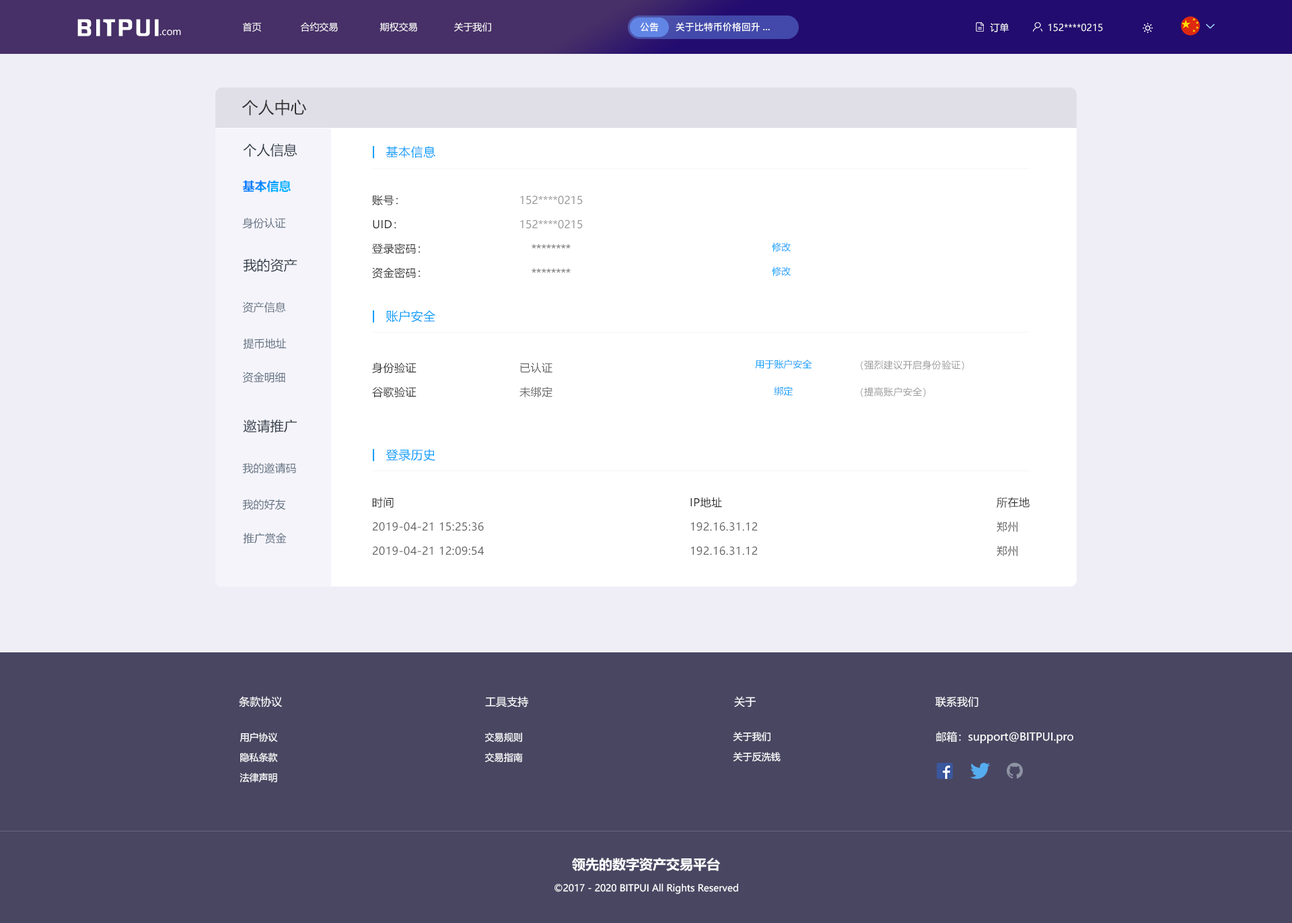
<style>
.page{position:relative;width:1292px;height:923px;background:#efeef7}
.page>*{position:absolute;margin:0}
.t1{font:20.6px "FZHZGBJW--GB1-0";letter-spacing:0.1em;color:#ffffff;scale:1.14 1}
.t2{font:9.4px "MicrosoftYaHei";color:#ffffff}
.t3{font:9.4px "PingFang-SC-Bold";color:#ffffff}
.t4{font:16.2px "MicrosoftYaHei";color:#333333}
.t5{font:13.5px "MicrosoftYaHei";color:#303b47}
.t6{font:12.1px "MicrosoftYaHei";letter-spacing:0.03em;color:#009dfa}
.t7{font:12.1px "MicrosoftYaHei-Bold";color:#009dfa}
.t8{font:10.8px/24.2px "MicrosoftYaHei";letter-spacing:0.03em;color:#333333}
.t9{font:10.8px/24.2px "MicrosoftYaHei";color:#999999}
.t10{font:10.8px/24.2px "MicrosoftYaHei";color:#666666}
.t11{font:10.8px "MicrosoftYaHei";color:#637282}
.t12{font:9.4px/24.2px "MicrosoftYaHei";color:#009dfa}
.t13{font:10.8px/24.2px "MicrosoftYaHei";letter-spacing:0.03em;color:#666666}
.t14{font:9.4px/26.9px "MicrosoftYaHei";color:#009dfa}
.t15{font:9.4px/26.9px "MicrosoftYaHei";letter-spacing:0.025em;color:#999999}
.t16{font:10.8px "MicrosoftYaHei";color:#ffffff}
.t17{font:9.4px/20.2px "MicrosoftYaHei";color:#ffffff}
.t18{font:13.5px "MicrosoftYaHei-Bold";color:#ffffff}
</style>
<div class="page">
<p class="t1" style="left:77px;top:19px;width:82px;height:17px">BITPUI</p>
<p class="t2" style="left:160px;top:30px;width:21px;height:6px">.com</p>
<p class="t2" style="left:243px;top:22px;width:248px;height:10px">首页              合约交易               期权交易             关于我们</p>
<p class="t3" style="left:640px;top:22px;width:19px;height:10px">公告</p>
<p class="t3" style="left:676px;top:22px;width:94px;height:10px">关于比特币价格回升...</p>
<p class="t2" style="left:990px;top:23px;width:19px;height:9px">订单</p>
<p class="t2" style="left:1049px;top:24px;width:54px;height:8px">152****0215</p>
<p class="t4" style="left:242px;top:100px;width:65px;height:16px">个人中心</p>
<p class="t5" style="left:243px;top:143px;width:54px;height:14px">个人信息</p>
<p class="t6" style="left:386px;top:146px;width:49px;height:12px">基本信息</p>
<p class="t7" style="left:242px;top:180px;width:49px;height:12px">基本信息</p>
<p class="t8" style="left:372px;top:195px;width:48px;height:84px">账号：<br>UID：<br>登录密码：<br>资金密码：</p>
<p class="t9" style="left:520px;top:195px;width:63px;height:78px;text-align:center">152****0215<br>152****0215<br><span class="t10">********<br>********</span></p>
<p class="t11" style="left:242px;top:217px;width:44px;height:12px">身份认证</p>
<p class="t12" style="left:772px;top:242px;width:19px;height:34px;text-align:center">修改<br>修改</p>
<p class="t5" style="left:243px;top:258px;width:54px;height:14px">我的资产</p>
<p class="t11" style="left:242px;top:302px;width:44px;height:11px">资产信息</p>
<p class="t6" style="left:386px;top:310px;width:49px;height:12px">账户安全</p>
<p class="t11" style="left:243px;top:338px;width:44px;height:11px">提币地址</p>
<p class="t8" style="left:372px;top:362px;width:45px;height:36px">身份验证<br>谷歌验证</p>
<p class="t13" style="left:520px;top:362px;width:33px;height:35px">已认证<br>未绑定</p>
<p class="t14" style="left:755px;top:359px;width:57px;height:37px;text-align:center">用于账户安全<br>绑定</p>
<p class="t15" style="left:861px;top:360px;width:103px;height:37px">（强烈建议开启身份验证）<br>（提高账户安全）</p>
<p class="t11" style="left:242px;top:372px;width:43px;height:11px">资金明细</p>
<p class="t5" style="left:243px;top:419px;width:54px;height:14px">邀请推广</p>
<p class="t6" style="left:386px;top:449px;width:49px;height:12px">登录历史</p>
<p class="t11" style="left:242px;top:462px;width:54px;height:11px">我的邀请码</p>
<p class="t13" style="left:372px;top:497px;width:112px;height:58px"><span class="t8">时间<br></span>2019-04-21 15:25:36<br>2019-04-21 12:09:54</p>
<p class="t13" style="left:691px;top:497px;width:67px;height:58px"><span class="t8">IP地址<br></span>192.16.31.12<br>192.16.31.12</p>
<p class="t13" style="left:997px;top:497px;width:33px;height:59px"><span class="t8">所在地<br></span>郑州<br>郑州</p>
<p class="t11" style="left:242px;top:499px;width:44px;height:11px">我的好友</p>
<p class="t11" style="left:243px;top:532px;width:44px;height:12px">推广赏金</p>
<p class="t16" style="left:239px;top:696px;width:43px;height:11px">条款协议</p>
<p class="t16" style="left:485px;top:696px;width:43px;height:11px">工具支持</p>
<p class="t16" style="left:734px;top:696px;width:23px;height:11px">关于</p>
<p class="t16" style="left:936px;top:696px;width:43px;height:11px">联系我们</p>
<p class="t17" style="left:240px;top:732px;width:38px;height:50px;text-align:center">用户协议<br>隐私条款<br>法律声明</p>
<p class="t17" style="left:485px;top:732px;width:38px;height:30px">交易规则<br>交易指南</p>
<p class="t17" style="left:733px;top:732px;width:48px;height:29px">关于我们<br>关于反洗钱</p>
<p class="t16" style="left:936px;top:731px;width:138px;height:13px">邮箱：support@BITPUI.pro</p>
<p class="t18" style="left:572px;top:857px;width:148px;height:14px">领先的数字资产交易平台</p>
<p class="t2" style="left:555px;top:883px;width:183px;height:11px">©2017 - 2020 BITPUI All Rights Reserved</p>
</div>
